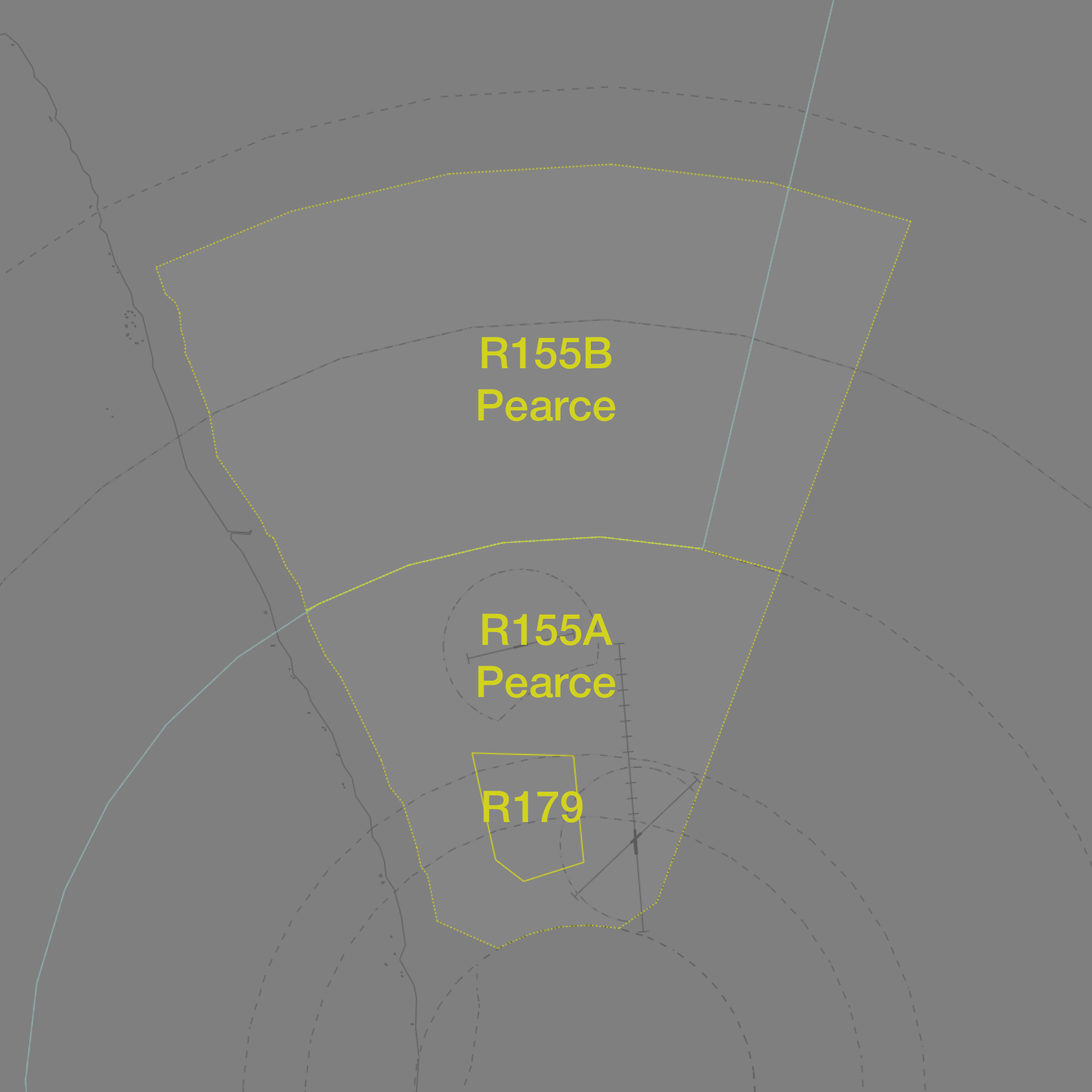
<style>
.page{position:relative;width:1092px;height:1092px;background:#7f7f7f}
.page>*{position:absolute;margin:0}
.t1{font:43.7px "HelveticaNeue-Medium";color:#d2d21e}
</style>
<div class="page">
<p class="t1" style="left:478px;top:337px;width:137px;height:85px;text-align:center">R155B<br>Pearce</p>
<p class="t1" style="left:478px;top:613px;width:137px;height:85px;text-align:center">R155A<br>Pearce</p>
<p class="t1" style="left:484px;top:790px;width:99px;height:33px">R179</p>
</div>
